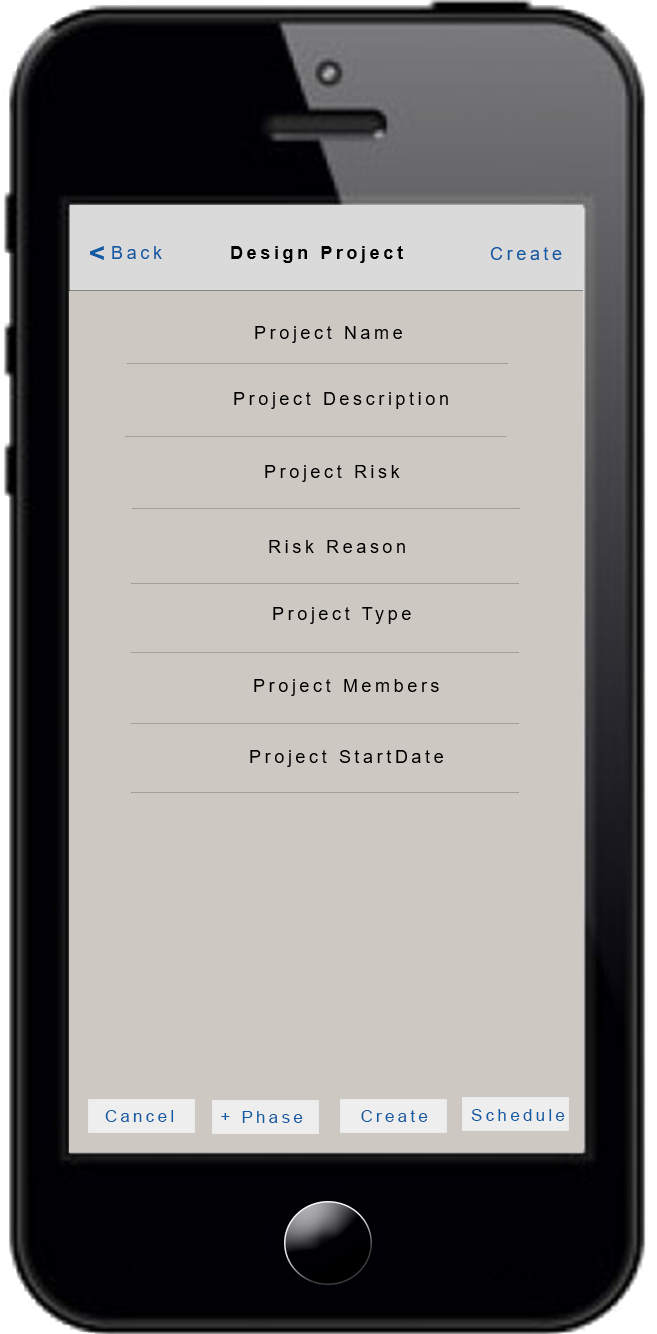
<style>
.page{position:relative;width:657px;height:1334px;background:#cdc8c2}
.page>*{position:absolute;margin:0}
.t1{font:30px "SourceSansPro-Bold";letter-spacing:0.2em;color:#115ba4}
.t2{font:18px "ArialMT";letter-spacing:0.2em;color:#115ba4}
.t3{font:18px "Arial-BoldMT";letter-spacing:0.2em;color:#000000}
.t4{font:18px "ArialMT";letter-spacing:0.2em;color:#000000}
.t5{font:16.7px "ArialMT";letter-spacing:0.2em;color:#115ba4}
</style>
<div class="page">
<p class="t1" style="left:90px;top:246px;width:14px;height:14px">&lt;</p>
<p class="t2" style="left:112px;top:246px;width:50px;height:13px">Back</p>
<p class="t3" style="left:231px;top:246px;width:172px;height:17px">Design Project</p>
<p class="t2" style="left:490px;top:247px;width:72px;height:13px">Create</p>
<p class="t4" style="left:255px;top:326px;width:147px;height:17px">Project Name</p>
<p class="t4" style="left:234px;top:392px;width:214px;height:17px">Project Description</p>
<p class="t4" style="left:265px;top:465px;width:135px;height:17px">Project Risk</p>
<p class="t4" style="left:269px;top:540px;width:136px;height:13px">Risk Reason</p>
<p class="t4" style="left:273px;top:607px;width:138px;height:17px">Project Type</p>
<p class="t4" style="left:254px;top:679px;width:185px;height:17px">Project Members</p>
<p class="t4" style="left:250px;top:750px;width:193px;height:17px">Project StartDate</p>
<p class="t5" style="left:105px;top:1110px;width:69px;height:12px">Cancel</p>
<p class="t5" style="left:361px;top:1110px;width:67px;height:12px">Create</p>
<p class="t5" style="left:471px;top:1109px;width:94px;height:12px">Schedule</p>
<p class="t5" style="left:221px;top:1111px;width:82px;height:12px">+ Phase</p>
</div>
